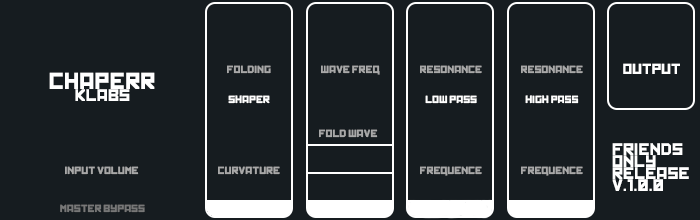
<style>
.page{position:relative;width:700px;height:220px;background:#161c20}
.page>*{position:absolute;margin:0}
.t1{font:10px "Kremlin";color:#a8a8a8}
.t2{font:14px "Kremlin";color:#ffffff}
.t3{font:22px "Kremlin";color:#ffffff}
.t4{font:16px "Kremlin";color:#ffffff}
.t5{font:10px "Kremlin";color:#ffffff}
.t6{font:10px "Kremlin";color:#777777}
</style>
<div class="page">
<p class="t1" style="left:227px;top:65px;width:44px;height:9px">FOLDING</p>
<p class="t1" style="left:321px;top:65px;width:59px;height:10px">WAVE FREQ</p>
<p class="t1" style="left:420px;top:65px;width:62px;height:9px">RESONANCE</p>
<p class="t1" style="left:521px;top:65px;width:62px;height:9px">RESONANCE</p>
<p class="t2" style="left:623px;top:63px;width:57px;height:11px">OUTPUT</p>
<p class="t3" style="left:49px;top:72px;width:106px;height:17px">CHAPERR</p>
<p class="t4" style="left:75px;top:89px;width:55px;height:12px">KLABS</p>
<p class="t5" style="left:228px;top:95px;width:42px;height:9px">SHAPER</p>
<p class="t5" style="left:425px;top:95px;width:52px;height:9px">LOW PASS</p>
<p class="t5" style="left:525px;top:95px;width:54px;height:9px">HIGH PASS</p>
<p class="t1" style="left:319px;top:129px;width:59px;height:9px">FOLD WAVE</p>
<p class="t4" style="left:612px;top:143px;width:71px;height:12px">FRIENDS</p>
<p class="t4" style="left:612px;top:155px;width:44px;height:12px">ONLY</p>
<p class="t1" style="left:65px;top:166px;width:74px;height:9px">INPUT VOLUME</p>
<p class="t1" style="left:218px;top:166px;width:62px;height:9px">CURVATURE</p>
<p class="t1" style="left:420px;top:166px;width:62px;height:10px">FREQUENCE</p>
<p class="t1" style="left:521px;top:166px;width:62px;height:10px">FREQUENCE</p>
<p class="t4" style="left:612px;top:167px;width:77px;height:12px">RELEASE</p>
<p class="t4" style="left:612px;top:179px;width:51px;height:12px">v.1.0.0</p>
<p class="t6" style="left:60px;top:204px;width:85px;height:9px">MASTER BYPASS</p>
</div>
